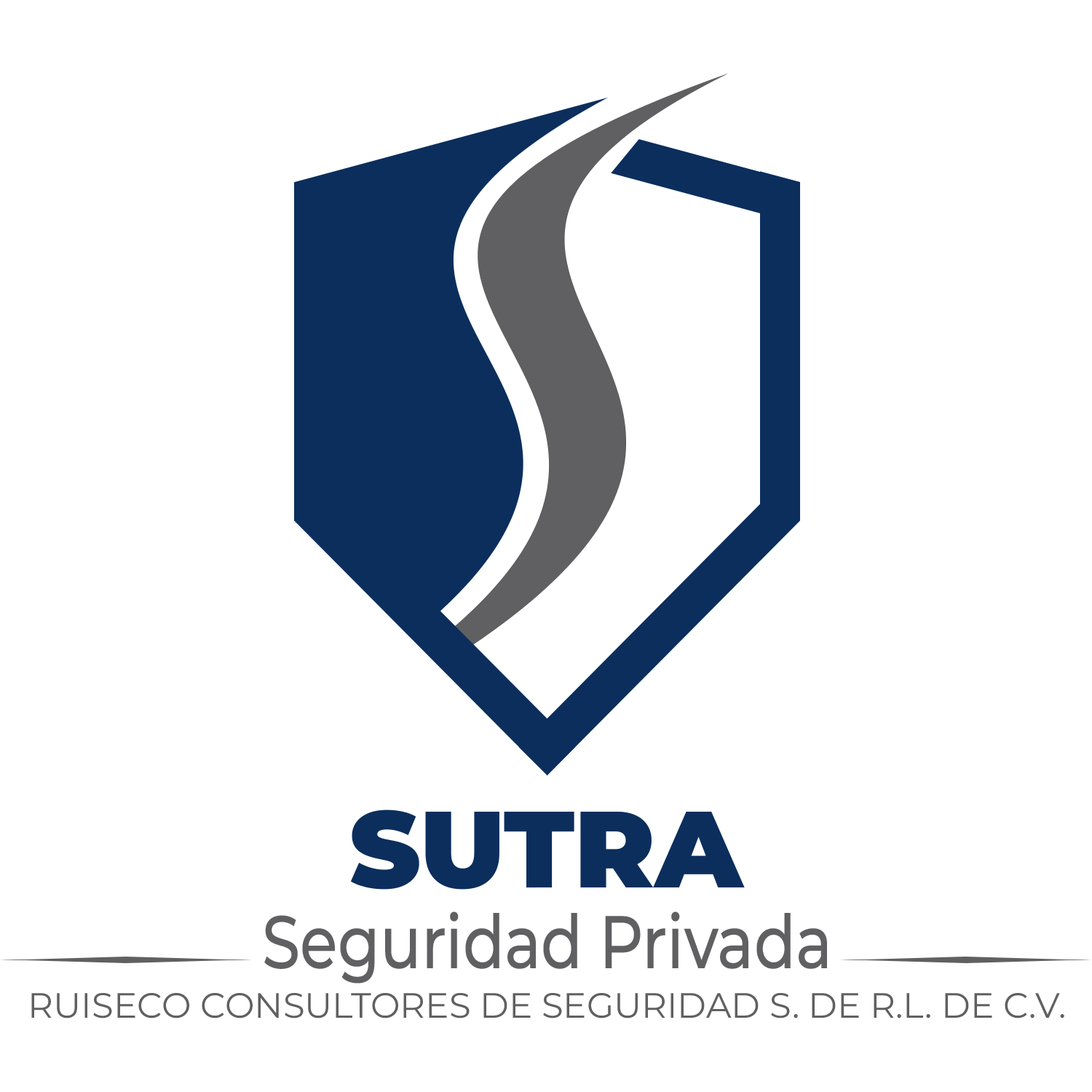
<style>
.page{position:relative;width:1092px;height:1092px;background:#ffffff}
.page>*{position:absolute;margin:0}
.t1{font:108.2px "Montserrat-Black";color:#0b2e5d}
.t2{font:74.4px "Montserrat-Medium";color:#606062;scale:0.82 1}
.t3{font:35.1px "Montserrat-Regular";color:#606062}
</style>
<div class="page">
<p class="t1" style="left:350px;top:810px;width:395px;height:80px">SUTRA</p>
<p class="t2" style="left:264px;top:911px;width:563px;height:73px">Seguridad Privada</p>
<p class="t3" style="left:31px;top:993px;width:1033px;height:25px">RUISECO CONSULTORES DE SEGURIDAD S. DE R.L. DE C.V.</p>
</div>
